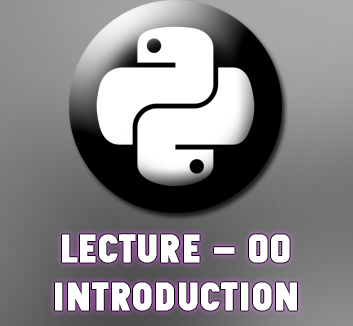
<style>
.page{position:relative;width:353px;height:326px}
.page>*{position:absolute;margin:0}
.t1{font:40px "ZilapSleep-Grunge";color:#ffffff;font-weight:bold}
</style>
<div class="page">
<p class="t1" style="left:55px;top:234px;width:242px;height:77px;text-align:center">LECTURE - 00<br>INTRODUCTION</p>
</div>
